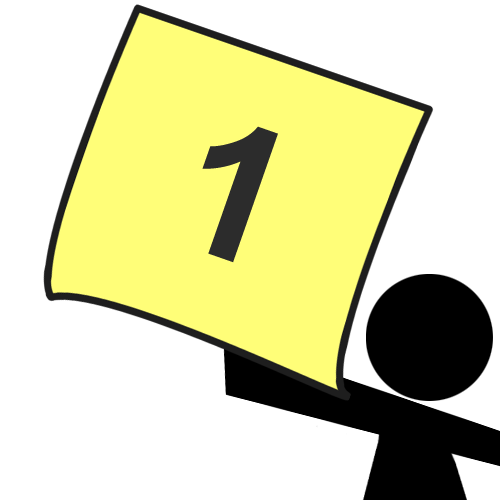
<style>
.page{position:relative;width:500px;height:500px;background:#ffffff}
.page>*{position:absolute;margin:0}
.t1{font:189px "Arial-BoldMT";color:#2c2c2c}
</style>
<div class="page">
<p class="t1" style="left:202px;top:126px;width:76px;height:137px;rotate:19deg">1</p>
</div>
